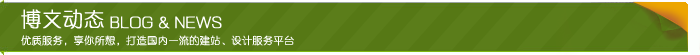
<style>
.page{position:relative;width:700px;height:55px;background:#5b7d1a}
.page>*{position:absolute;margin:0}
.t1{font:20px "FZXQJW--GB1-0";letter-spacing:0.025em;color:#ffffff;font-weight:bold}
.t2{font:15px "FZXQJW--GB1-0";letter-spacing:0.025em;color:#ffffff;font-weight:bold}
.t3{font:10px "FZXQJW--GB1-0";letter-spacing:0.025em;color:#ffffff;font-weight:bold}
</style>
<div class="page">
<p class="t1" style="left:21px;top:9px;width:83px;height:20px">博文动态</p>
<p class="t2" style="left:110px;top:16px;width:112px;height:13px">BLOG &amp; NEWS</p>
<p class="t3" style="left:21px;top:35px;width:273px;height:11px">优质服务，享你所想，打造国内一流的建站、设计服务平台</p>
</div>
